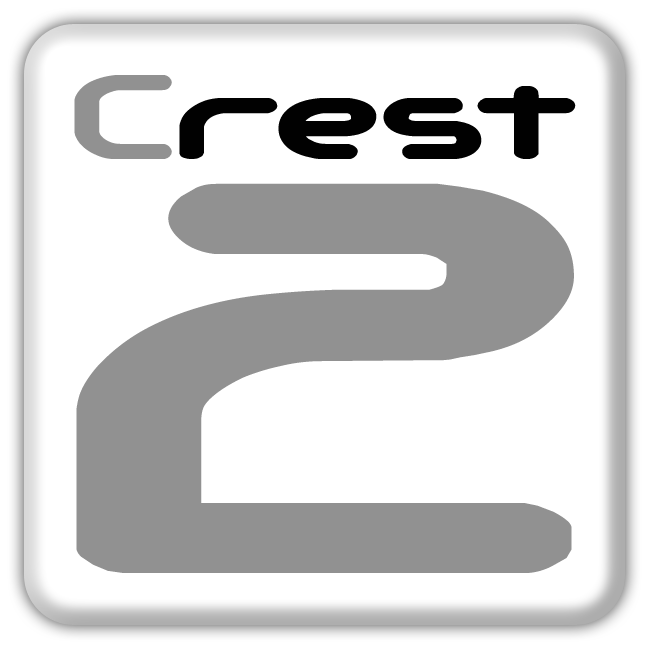
<style>
.page{position:relative;width:650px;height:650px;background:#ffffff}
.page>*{position:absolute;margin:0}
.t1{font:121px "AutomaticaBRK";color:#010101}
.t2{font:121px "AutomaticaBRK";color:#919191}
.t3{font:560.9px "AutomaticaBRK";color:#919191;scale:1.1 1}
</style>
<div class="page">
<p class="t1" style="left:74px;top:75px;width:502px;height:84px"><span class="t2">C</span>rest</p>
<p class="t3" style="left:76px;top:183px;width:498px;height:390px">2</p>
</div>
